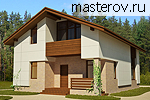
<style>
.page{position:relative;width:150px;height:100px}
.page>*{position:absolute;margin:0}
.t1{font:14px "Tahoma";color:#000000}
</style>
<div class="page">
<p class="t1" style="left:72px;top:2px;width:73px;height:10px">masterov.ru</p>
</div>
